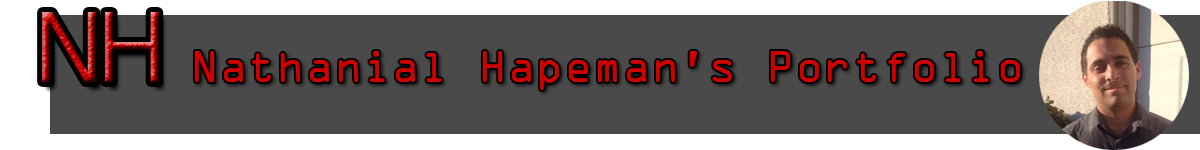
<style>
.page{position:relative;width:1200px;height:150px;background:#4a4a4a}
.page>*{position:absolute;margin:0}
.t1{font:100px "DevanagariSangamMN"}
.t2{font:40px "OCRAStd";color:#cf0000}
</style>
<div class="page">
<p class="t1" style="left:42px;top:12px;width:117px;height:70px">NH</p>
<p class="t2" style="left:195px;top:51px;width:825px;height:39px">Nathanial Hapeman’s Portfolio</p>
</div>
